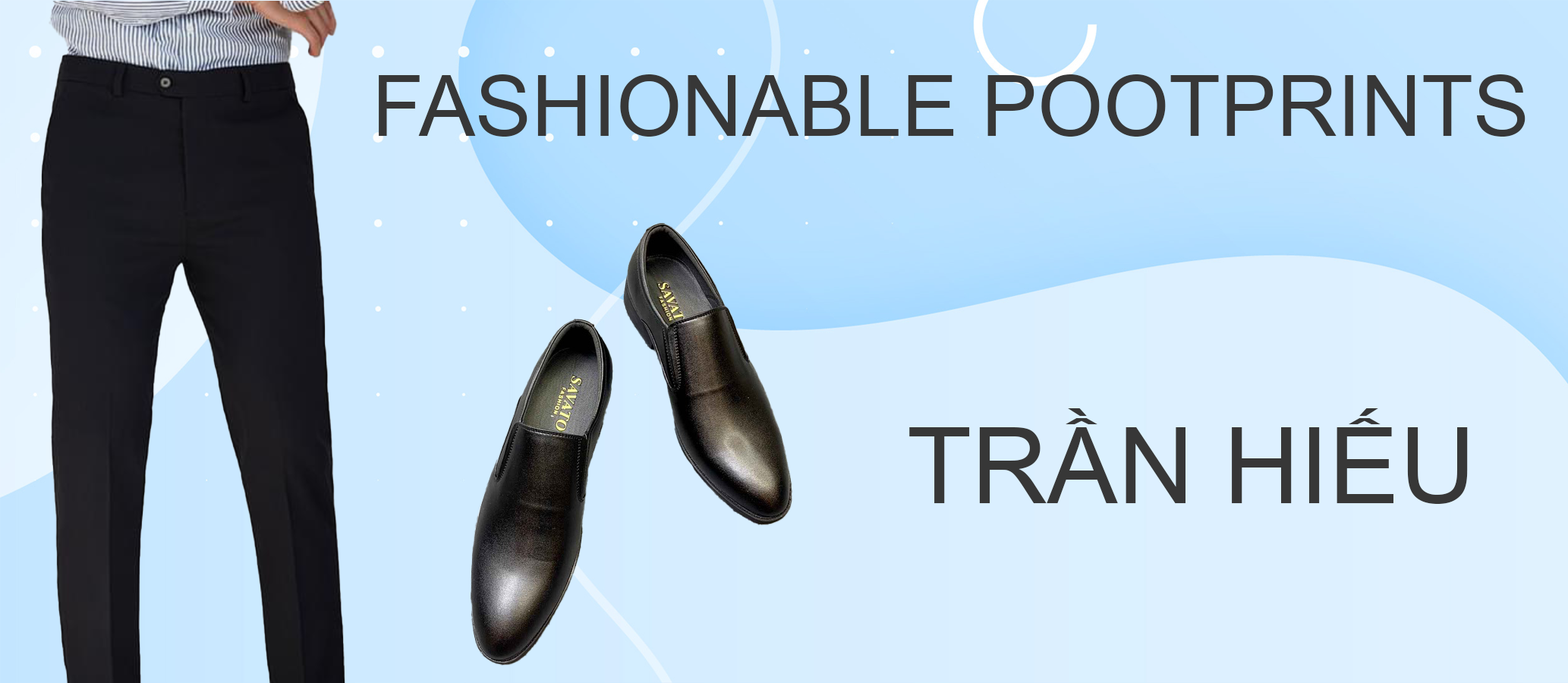
<style>
.page{position:relative;width:1568px;height:683px}
.page>*{position:absolute;margin:0}
.t1{font:84.3px "ArialMT";color:#373737}
.t2{font:105.4px "ArialMT";color:#373737}
.t3{font:632.5px "ArialMT";color:#373737}
</style>
<div class="page">
<p class="t1" style="left:379px;top:74px;width:1146px;height:63px">FASHIONABLE POOTPRINTS</p>
<p class="t2" style="left:909px;top:408px;width:559px;height:96px"><span class="t3"> </span>TRẦN HIẾU</p>
</div>
